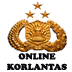
<style>
.page{position:relative;width:72px;height:72px;background:#ffffff}
.page>*{position:absolute;margin:0}
.t1{font:8.7px "CooperBlack";color:#08070d}
</style>
<div class="page">
<p class="t1" style="left:7px;top:53px;width:60px;height:17px;text-align:center">ONLINE<br>KORLANTAS</p>
</div>
